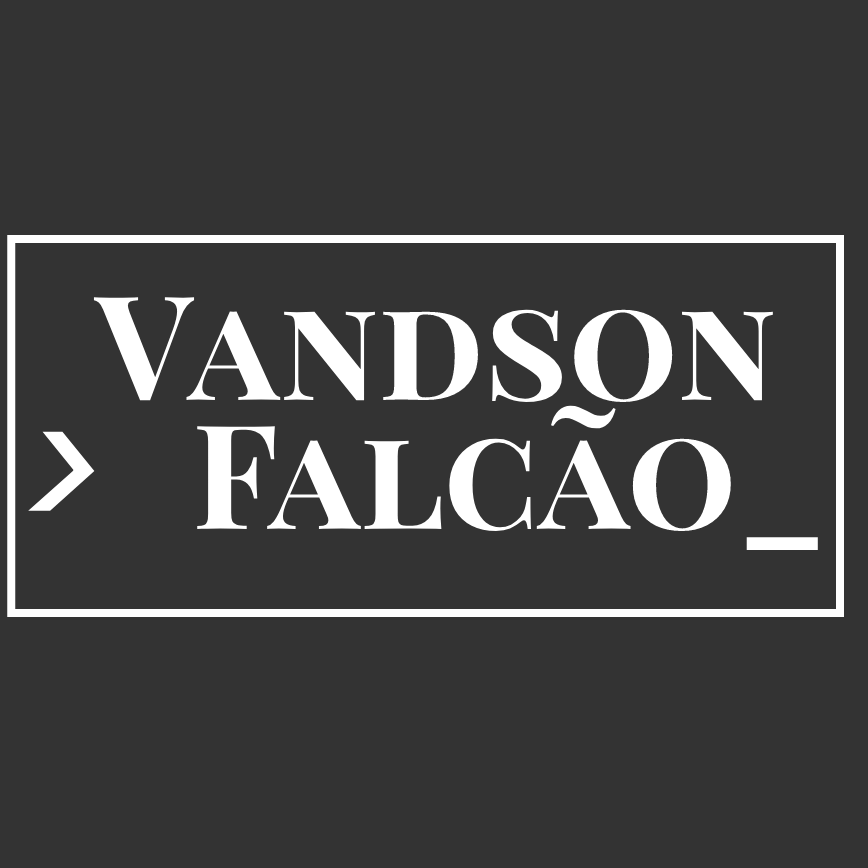
<style>
.page{position:relative;width:868px;height:868px;background:#333333}
.page>*{position:absolute;margin:0}
.t1{font:145.1px "PlayfairDisplaySC-Bold";color:#ffffff}
.t2{font:145.1px "DMMono-MediumItalic";color:#ffffff}
</style>
<div class="page">
<p class="t1" style="left:93px;top:297px;width:680px;height:106px">Vandson</p>
<p class="t1" style="left:197px;top:405px;width:621px;height:145px">Falcão_</p>
<p class="t2" style="left:28px;top:431px;width:67px;height:80px">&gt;</p>
</div>
